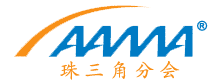
<style>
.page{position:relative;width:215px;height:82px;background:#ffffff}
.page>*{position:absolute;margin:0}
.t1{font:13.3px "Arial-BoldMT";color:#007bc4}
.t2{font:20px "STKaiti";color:#f89018}
</style>
<div class="page">
<p class="t1" style="left:197px;top:20px;width:11px;height:11px">®</p>
<p class="t2" style="left:60px;top:61px;width:120px;height:19px">珠 三 角 分 会</p>
</div>
